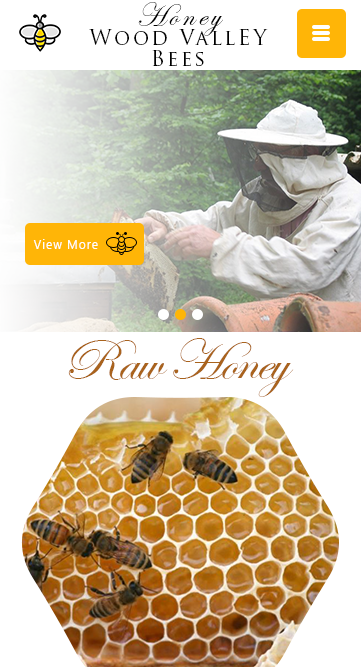
<style>
.page{position:relative;width:361px;height:667px;background:#ffffff}
.page>*{position:absolute;margin:0}
.t1{font:20.8px/20.8px "TrajanPro-Regular";letter-spacing:0.125em;color:#000000}
.t2{font:33.3px/25px "EdwardianScriptITC";letter-spacing:0.125em;color:#000000}
.t3{font:20.9px/20.9px "TrajanPro-Regular";letter-spacing:0.125em;color:#000000;scale:0.94 1}
.t4{font:33.5px/25.1px "EdwardianScriptITC";letter-spacing:0.125em;color:#000000;scale:0.94 1}
.t5{font:11.4px "Tahoma";letter-spacing:-0.035em;color:#ffb508;scale:1.08 1}
.t6{font:11.4px "Tahoma";letter-spacing:-0.035em;color:#ffffff;scale:1.08 1}
.t7{font:12.5px "SegoeUI";letter-spacing:0.065em;color:#ffffff}
.t8{font:56.9px "EdwardianScriptITC";letter-spacing:-0.035em;color:#a9631e;scale:1.08 1}
</style>
<div class="page">
<p class="t1" style="left:89px;top:2px;width:179px;height:64px;text-align:center"><span class="t2">Honey<br></span>Wood VallEY<br>Bees</p>
<p class="t3" style="left:93px;top:1px;width:172px;height:64px;text-align:center"><span class="t4">Honey<br></span>Wood VallEY<br>Bees</p>
<p class="t5" style="left:32px;top:205px;width:91px;height:9px"><span class="t6">Home &gt; </span>About Us</p>
<p class="t7" style="left:33px;top:239px;width:65px;height:10px">View More</p>
<p class="t8" style="left:68px;top:338px;width:226px;height:59px">Raw Honey</p>
</div>
